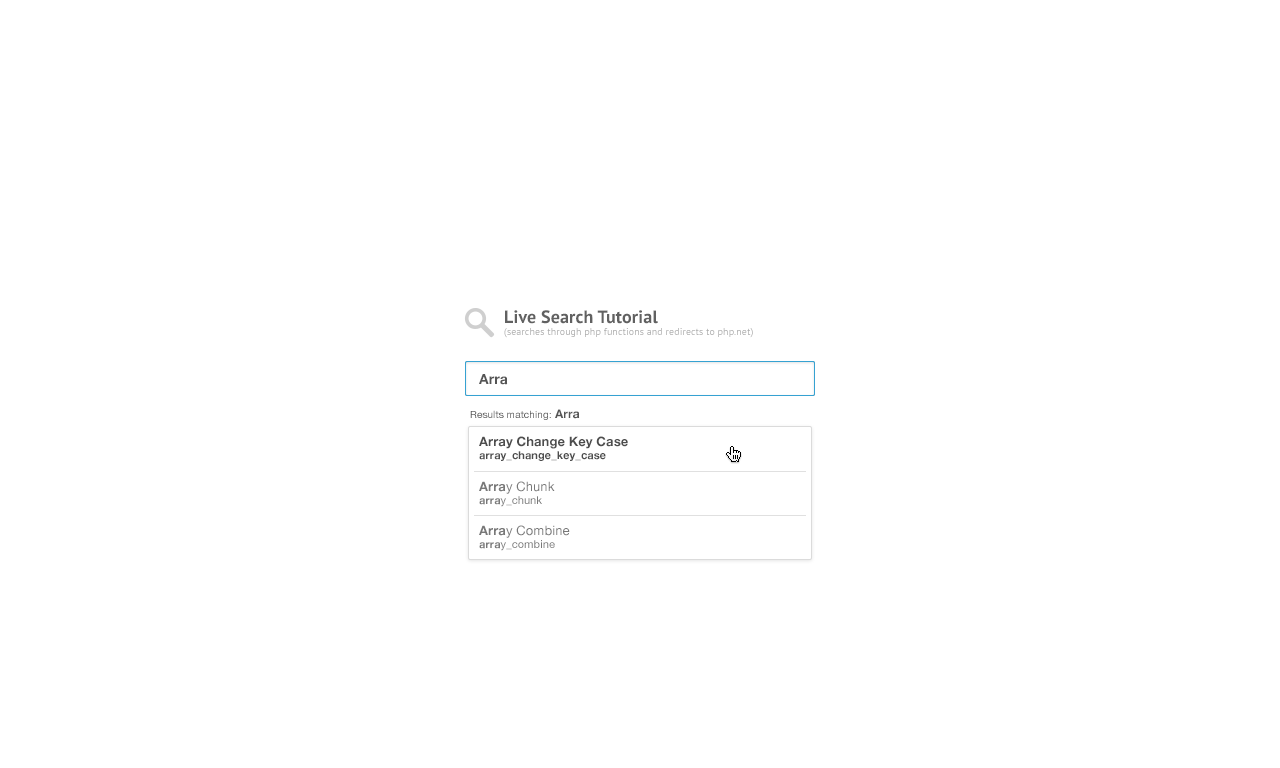
<style>
.page{position:relative;width:1280px;height:768px;background:#ffffff}
.page>*{position:absolute;margin:0}
.t1{font:10px "PTSans-Regular";letter-spacing:0.008em;color:#ababab}
.t2{font:18px "PTSans-Bold";letter-spacing:0.008em;color:#616161}
.t3{font:14px "HelveticaNeue-Bold";letter-spacing:0.008em;color:#555555}
.t4{font:10px "HelveticaNeue";letter-spacing:0.008em;color:#555555}
.t5{font:12px "HelveticaNeue-Bold";letter-spacing:0.008em;color:#555555}
.t6{font:13px "HelveticaNeue-Bold";letter-spacing:0.008em;color:#4d4d4d}
.t7{font:11px "HelveticaNeue-Bold";letter-spacing:0.008em;color:#4d4d4d}
.t8{font:13px "HelveticaNeue";letter-spacing:0.008em;color:#797979}
.t9{font:13px "HelveticaNeue-Bold";letter-spacing:0.008em;color:#797979}
.t10{font:11px "HelveticaNeue-Bold";letter-spacing:0.008em;color:#797979}
.t11{font:11px "HelveticaNeue";letter-spacing:0.008em;color:#797979}
.t12{font:13px/24px "HelveticaNeue";letter-spacing:0.008em;color:#787878}
.t13{font:13px/24px "HelveticaNeue-Bold";letter-spacing:0.008em;color:#787878}
.t14{font:11px "HelveticaNeue-Bold";letter-spacing:0.008em;color:#787878}
.t15{font:11px "HelveticaNeue";letter-spacing:0.008em;color:#787878}
</style>
<div class="page">
<p class="t1" style="left:504px;top:310px;width:249px;height:28px"><span class="t2">Live Search Tutorial<br></span>(searches through php functions and redirects to php.net)</p>
<p class="t3" style="left:479px;top:374px;width:29px;height:11px">Arra</p>
<p class="t4" style="left:470px;top:409px;width:110px;height:11px">Results matching:<span class="t5"> Arra</span></p>
<p class="t6" style="left:479px;top:436px;width:149px;height:25px">Array Change Key Case<br><span class="t7">array_change_key_case</span></p>
<p class="t8" style="left:479px;top:481px;width:76px;height:26px"><span class="t9">Arra</span>y Chunk<br><span class="t10">arra</span><span class="t11">y_chunk</span></p>
<p class="t12" style="left:479px;top:525px;width:91px;height:26px"><span class="t13">Arra</span>y Combine<br><span class="t14">arra</span><span class="t15">y_combine</span></p>
</div>
